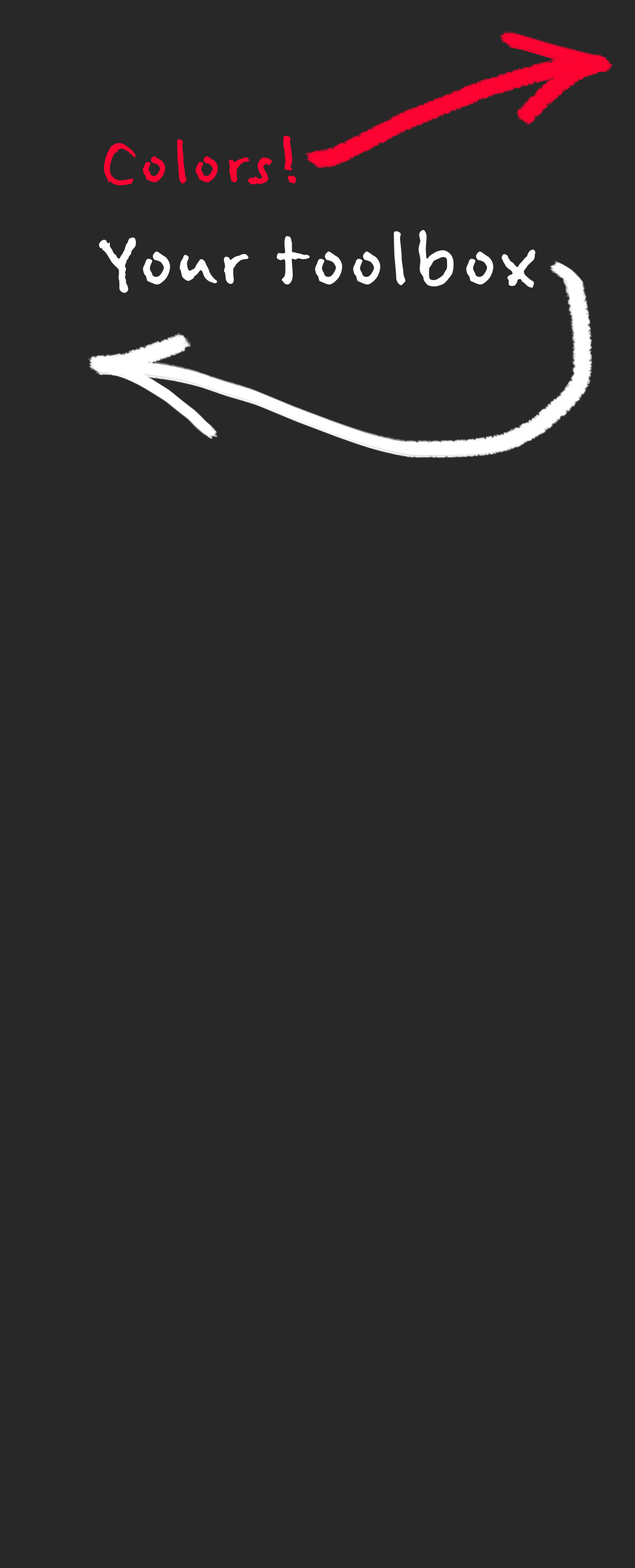
<style>
.page{position:relative;width:635px;height:1568px;background:#282828}
.page>*{position:absolute;margin:0}
.t1{font:79.5px "FeltTipWoman";color:#fc0332}
.t2{font:96.8px "FeltTipWoman";color:#ffffff}
</style>
<div class="page">
<p class="t1" style="left:104px;top:135px;width:193px;height:50px">Colors!</p>
<p class="t2" style="left:99px;top:230px;width:436px;height:63px">Your toolbox</p>
</div>
